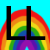
<style>
.page{position:relative;width:50px;height:50px;background:#00ffff}
.page>*{position:absolute;margin:0}
.t1{font:50px "MyriadPro-Regular";color:#000000}
</style>
<div class="page">
<p class="t1" style="left:6px;top:6px;width:20px;height:34px">L</p>
<p class="t1" style="left:26px;top:6px;width:20px;height:34px">L</p>
</div>
